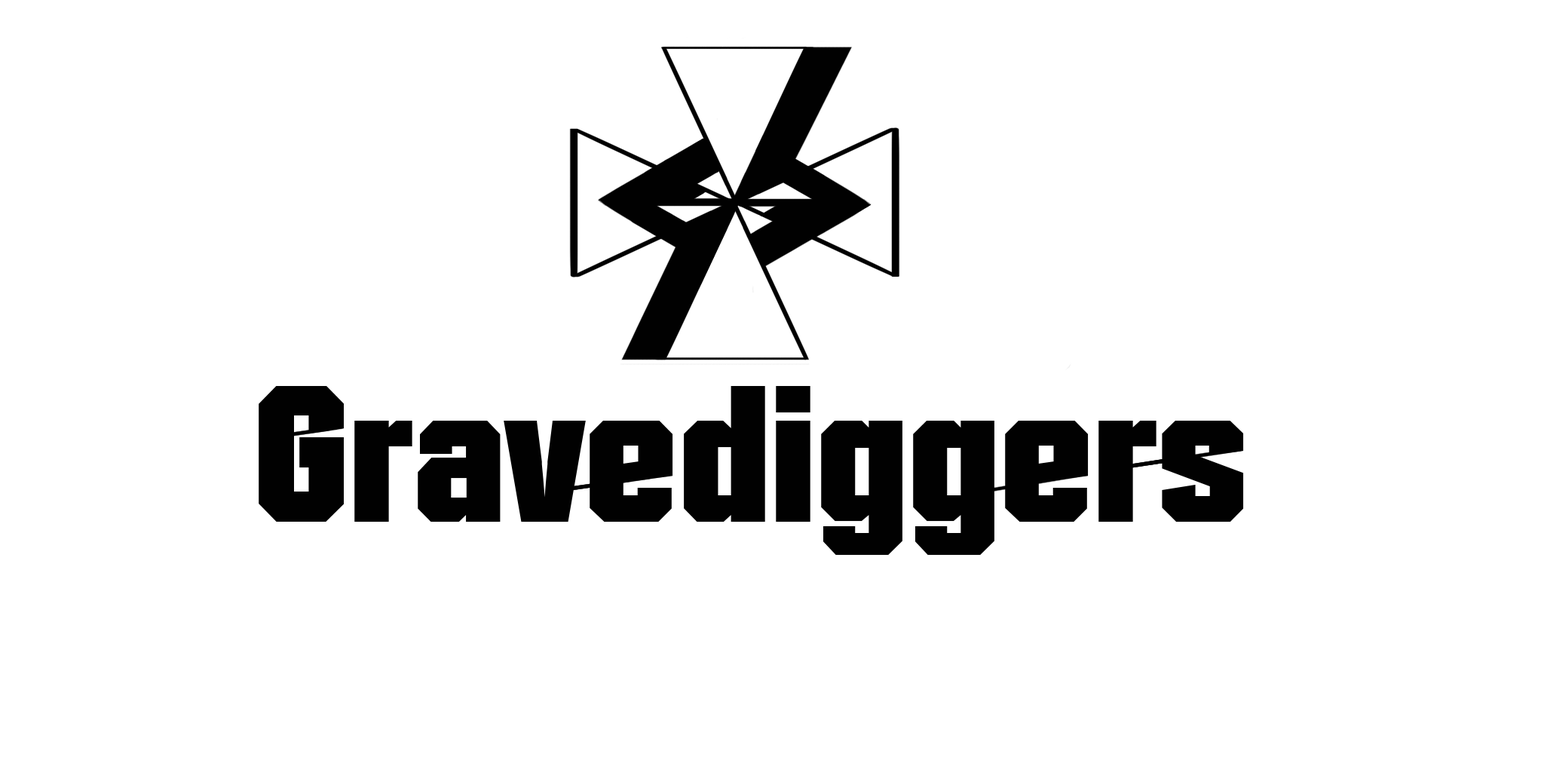
<style>
.page{position:relative;width:1544px;height:772px;background:#ffffff}
.page>*{position:absolute;margin:0}
.t1{font:188.5px "Autumn";color:#010101}
</style>
<div class="page">
<p class="t1" style="left:259px;top:386px;width:985px;height:169px">Gravediggers</p>
</div>
